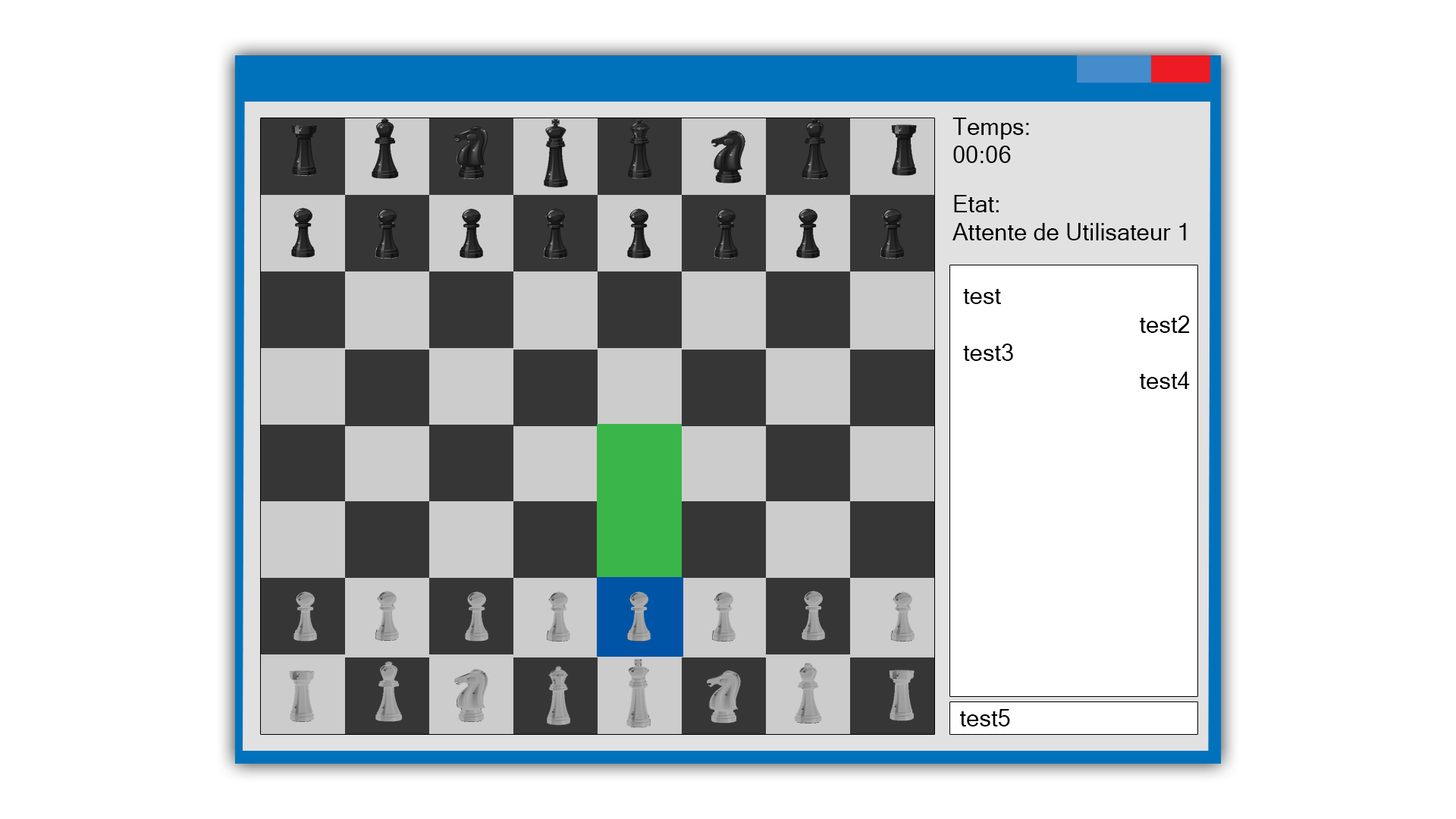
<style>
.page{position:relative;width:1456px;height:819px;background:#ffffff}
.page>*{position:absolute;margin:0}
.t1{font:23.5px "MicrosoftSansSerif";color:#000000}
</style>
<div class="page">
<p class="t1" style="left:952px;top:118px;width:77px;height:45px">Temps:<br>00:06</p>
<p class="t1" style="left:952px;top:195px;width:234px;height:45px">Etat:<br>Attente de Utilisateur 1</p>
<p class="t1" style="left:963px;top:289px;width:227px;height:100px">test<br>        test2<br>test3<br>        test4</p>
<p class="t1" style="left:960px;top:709px;width:50px;height:17px">test5</p>
</div>
